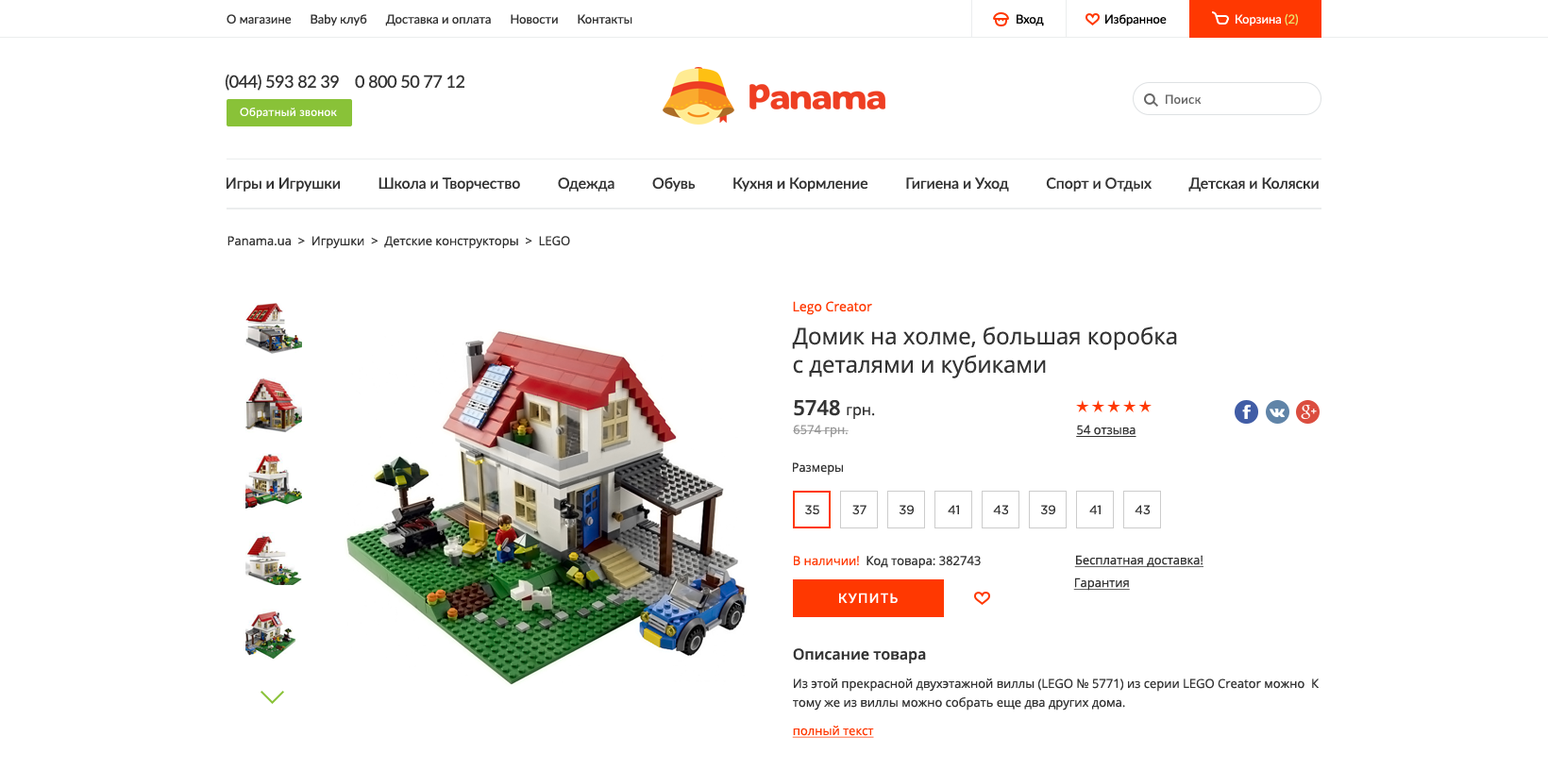
<style>
.page{position:relative;width:1548px;height:770px;background:#ffffff}
.page>*{position:absolute;margin:0}
.t1{font:12.3px "Lato-Regular";color:#333333}
.t2{font:12.3px "Lato-Regular";color:#000000}
.t3{font:12.3px "Lato-Regular";color:#ffffff}
.t4{font:12.3px "Lato-Regular";color:#ebe26a}
.t5{font:17px/18.9px "Lato-Regular";letter-spacing:-0.025em;color:#333333}
.t6{font:11.3px/28.3px "Lato-Regular";letter-spacing:0.025em;color:#ffffff}
.t7{font:12.3px "Lato-Regular";letter-spacing:0.025em;color:#666666}
.t8{font:15.1px "Lato-Medium";letter-spacing:-0.005em;color:#333333}
.t9{font:12.3px "OpenSans";color:#333333}
.t10{font:22.7px/33px "OpenSans";color:#333333}
.t11{font:13.2px/33px "OpenSans";color:#ff3801}
.t12{font:22.7px/28.3px "OpenSans";color:#333333}
.t13{font:12.3px/18.9px "OpenSans";color:#999999}
.t14{font:20.8px/18.9px "OpenSans-Semibold";color:#333333}
.t15{font:15.1px/18.9px "OpenSans";color:#333333}
.t16{font:12.5px "OpenSans";color:#333333;text-decoration:underline}
.t17{font:12.3px "GothamPro";color:#333333}
.t18{font:12.3px "OpenSans";color:#ff3801}
.t19{font:12.3px "OpenSans";color:#333333;text-decoration:underline}
.t20{font:13.2px "Lato-Semibold";letter-spacing:0.1em;color:#ffffff;text-transform:uppercase}
.t21{font:12.3px/18.9px "OpenSans";color:#333333}
.t22{font:15.1px/18.9px "OpenSans-Semibold";color:#333333}
.t23{font:12.3px/28.3px "OpenSans";color:#333333}
.t24{font:12.3px/28.3px "OpenSans";color:#ff3801;text-decoration:underline}
</style>
<div class="page">
<p class="t1" style="left:227px;top:14px;width:405px;height:12px">О магазине      Baby клуб      Доставка и оплата      Новости      Контакты</p>
<p class="t2" style="left:1017px;top:14px;width:27px;height:12px">Вход</p>
<p class="t2" style="left:1105px;top:14px;width:62px;height:12px">Избранное</p>
<p class="t3" style="left:1236px;top:13px;width:62px;height:13px">Корзина<span class="t4"> (2)</span></p>
<p class="t5" style="left:226px;top:74px;width:238px;height:44px">(044) 593 82 39    0 800 50 77 12<br>    <span class="t6">Обратный звонок</span></p>
<p class="t7" style="left:1166px;top:94px;width:36px;height:10px">Поиск</p>
<p class="t8" style="left:227px;top:177px;width:1092px;height:15px">Игры и Игрушки          Школа и Творчество          Одежда          Обувь          Кухня и Кормление          Гигиена и Уход          Спорт и Отдых          Детская и Коляски</p>
<p class="t9" style="left:227px;top:236px;width:343px;height:12px">Panama.ua  &gt;  Игрушки  &gt;  Детские конструкторы  &gt;  LEGO</p>
<p class="t10" style="left:792px;top:301px;width:385px;height:78px"><span class="t11">Lego Creator<br></span>Домик на холме, большая коробка <br><span class="t12">с деталями и кубиками</span></p>
<p class="t13" style="left:793px;top:400px;width:82px;height:38px"><span class="t14">5748 </span><span class="t15">грн. <br></span>6574 грн.</p>
<p class="t16" style="left:1076px;top:425px;width:61px;height:12px">54 отзыва</p>
<p class="t9" style="left:793px;top:463px;width:50px;height:13px">Размеры</p>
<p class="t17" style="left:805px;top:505px;width:14px;height:9px">35</p>
<p class="t17" style="left:852px;top:505px;width:15px;height:9px">37</p>
<p class="t17" style="left:899px;top:505px;width:15px;height:9px">39</p>
<p class="t17" style="left:948px;top:505px;width:11px;height:9px">41</p>
<p class="t17" style="left:993px;top:505px;width:15px;height:9px">43</p>
<p class="t17" style="left:1040px;top:505px;width:15px;height:9px">39</p>
<p class="t17" style="left:1089px;top:505px;width:12px;height:9px">41</p>
<p class="t17" style="left:1135px;top:505px;width:15px;height:9px">43</p>
<p class="t9" style="left:794px;top:556px;width:187px;height:12px"><span class="t18">В наличии!  </span>Код товара: 382743</p>
<p class="t19" style="left:1074px;top:555px;width:130px;height:12px">Бесплатная доставка!</p>
<p class="t19" style="left:1073px;top:578px;width:57px;height:13px">Гарантия</p>
<p class="t20" style="left:839px;top:593px;width:59px;height:11px">купить</p>
<p class="t21" style="left:792px;top:648px;width:527px;height:90px"><span class="t22">Описание товара<br></span><span class="t23">Из этой прекрасной двухэтажной виллы (LEGO № 5771) из серии LEGO Creator можно </span> К тому же из виллы можно собрать еще два других дома.<br><span class="t24">полный текст<br></span> Дополнительные характеристики: - работающий дверной звонок со звуком собачьего лая - на верхнем этаже камин - на вилле есть гараж с машиной - на вилле есть площадка для гриля со складным креслом и садовыми растениями - в набор входят мини-фигурка и собака - 3 разных модели: из виллы можно собрать два других дома<br> <br>Размеры: 48х38х95 см<br>Возраст: 8+<br>Материал: пластмасса<br>Производитель: Lego Creator (Дания)<br>Сделано в: Дания<br>Комплектация: 714 деталей<br>Артикул: 5771</p>
</div>
